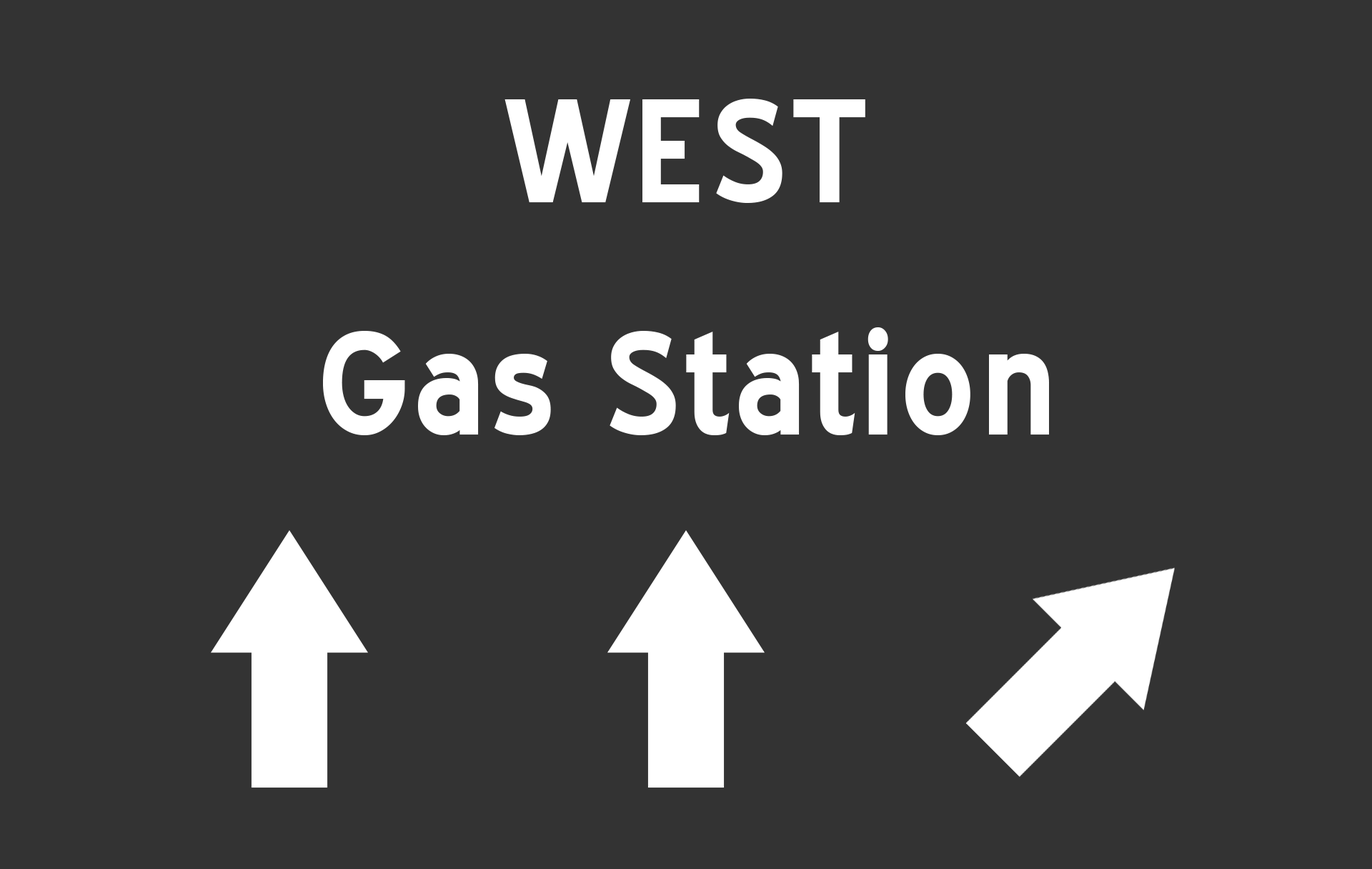
<style>
.page{position:relative;width:1372px;height:869px;background:#333333}
.page>*{position:absolute;margin:0}
.t1{font:142.9px "BlueHighway-Bold";letter-spacing:0.02em;color:#ffffff}
</style>
<div class="page">
<p class="t1" style="left:505px;top:99px;width:360px;height:104px">WEST</p>
<p class="t1" style="left:323px;top:327px;width:726px;height:108px">Gas Station</p>
</div>
